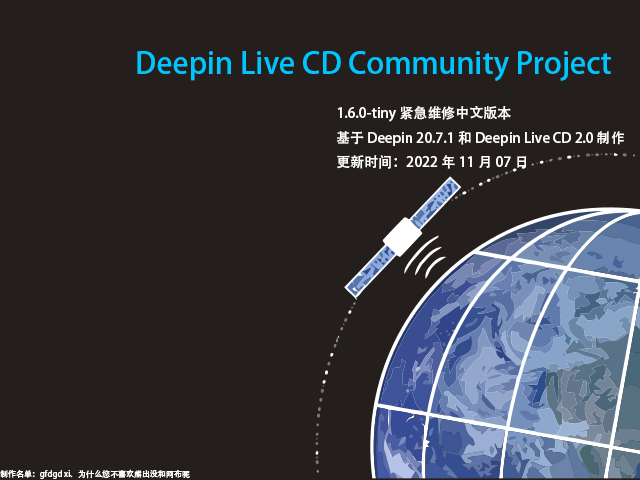
<style>
.page{position:relative;width:640px;height:480px;background:#241f1c}
.page>*{position:absolute;margin:0}
.t1{font:30px "AdobeHeitiStd-Regular";color:#00c6ff}
.t2{font:14px "AdobeHeitiStd-Regular";color:#ffffff}
.t3{font:8px "AdobeHeitiStd-Regular";color:#ffffff}
</style>
<div class="page">
<p class="t1" style="left:137px;top:51px;width:474px;height:30px">Deepin Live CD Community Project</p>
<p class="t2" style="left:336px;top:106px;width:288px;height:63px">1.6.0-tiny 紧急维修中文版本<br>基于 Deepin 20.7.1 和 Deepin Live CD 2.0 制作<br>更新时间：2022年11月07日</p>
<p class="t3" style="left:0px;top:469px;width:190px;height:10px">制作名单：gfdgd xi、为什么您不喜欢熊出没和阿布呢</p>
</div>
